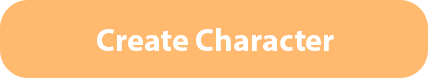
<style>
.page{position:relative;width:428px;height:78px;background:#ffba70}
.page>*{position:absolute;margin:0}
.t1{font:32px "MyriadPro-Bold";color:#ffffff}
</style>
<div class="page">
<p class="t1" style="left:97px;top:28px;width:237px;height:23px">Create Character</p>
</div>
